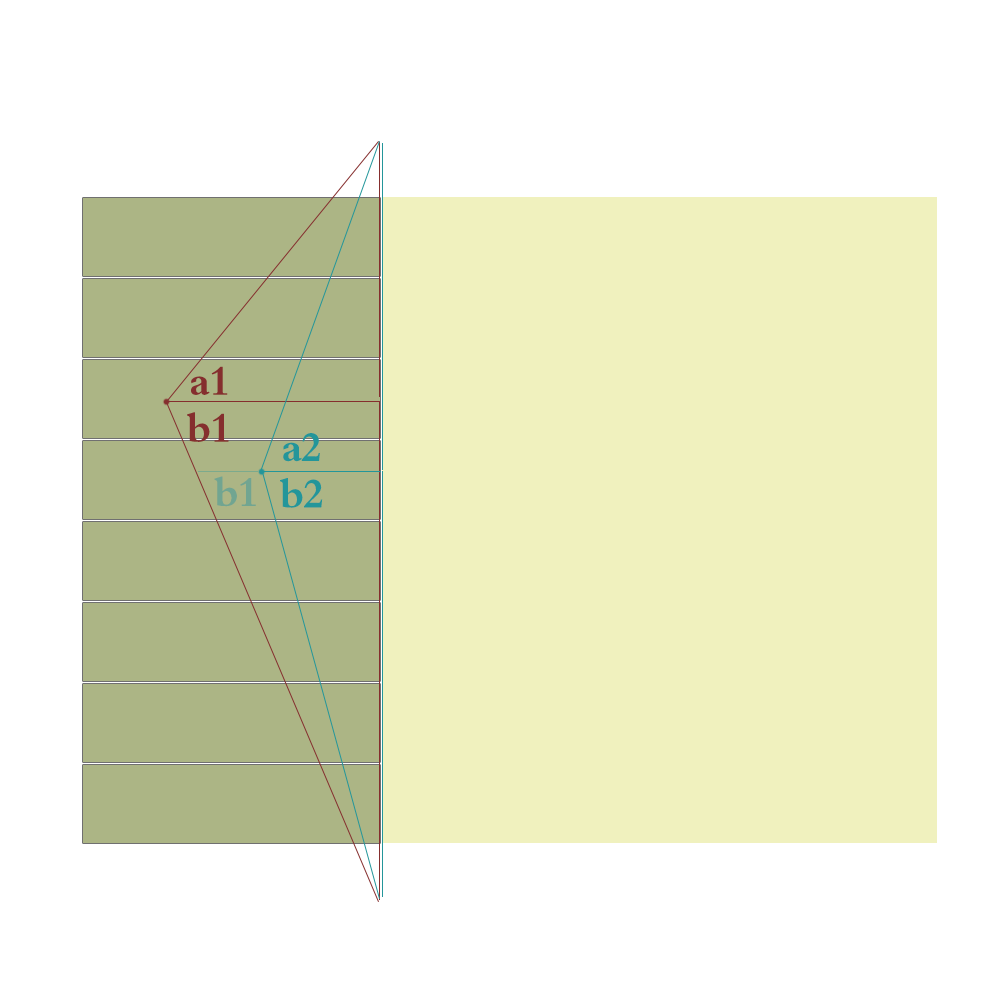
<style>
.page{position:relative;width:1000px;height:1000px;background:#ffffff}
.page>*{position:absolute;margin:0}
.t1{font:44px "FZDBSFW--GB1-0";letter-spacing:-0.04em;color:#852e2e}
.t2{font:44px "FZDBSFW--GB1-0";letter-spacing:-0.04em;color:#23969a}
.t3{font:44px "FZDBSFW--GB1-0";letter-spacing:-0.04em;color:#71a591}
</style>
<div class="page">
<p class="t1" style="left:191px;top:366px;width:37px;height:29px">a1</p>
<p class="t1" style="left:187px;top:412px;width:42px;height:30px">b1</p>
<p class="t2" style="left:283px;top:433px;width:37px;height:29px">a2</p>
<p class="t3" style="left:214px;top:476px;width:42px;height:31px">b1</p>
<p class="t2" style="left:280px;top:478px;width:43px;height:30px">b2</p>
</div>
